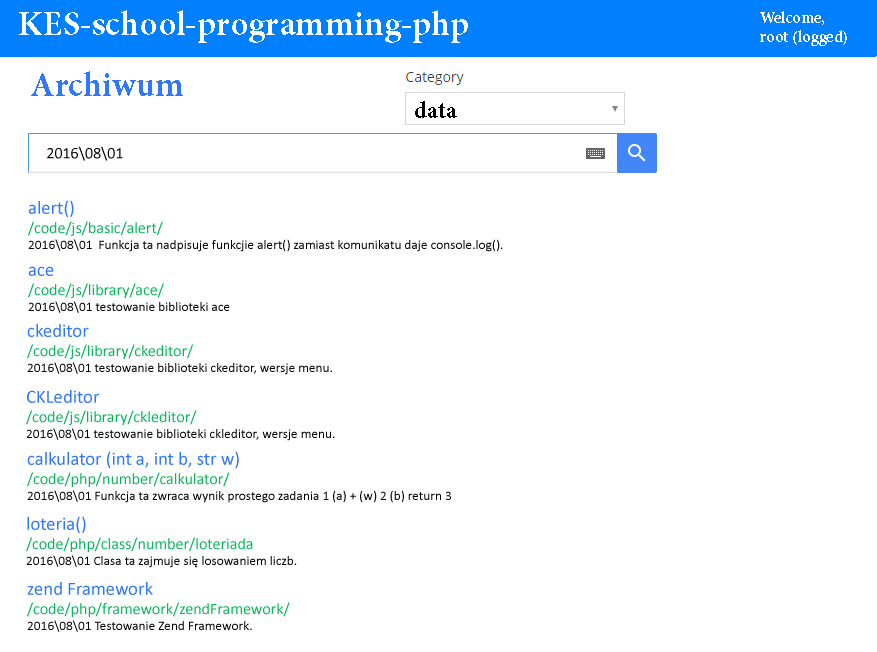
<style>
.page{position:relative;width:877px;height:652px;background:#ffffff}
.page>*{position:absolute;margin:0}
.t1{font:34.7px "MinionPro-Bold";color:#ffffff}
.t2{font:16px "MinionPro-Bold";color:#ffffff}
.t3{font:34.7px "MinionPro-Bold";color:#3077fa}
.t4{font:16px "Calibri";color:#030303}
.t5{font:13.3px "Calibri";color:#030303}
.t6{font:18.7px "Calibri";color:#3077fa}
.t7{font:16px "Calibri";color:#08b65a}
</style>
<div class="page">
<p class="t1" style="left:19px;top:10px;width:449px;height:33px">KES-school-programming-php</p>
<p class="t2" style="left:760px;top:11px;width:87px;height:35px">Welcome,<br>root (logged)</p>
<p class="t3" style="left:31px;top:71px;width:152px;height:25px">Archiwum</p>
<p class="t4" style="left:47px;top:146px;width:76px;height:15px">2016\08\01</p>
<p class="t5" style="left:28px;top:200px;width:475px;height:52px"><span class="t6">alert()<br></span><span class="t7">/code/js/basic/alert/  <br></span>2016\08\01  Funkcja ta nadpisuje funkcjie alert() zamiast komunikatu daje console.log().</p>
<p class="t5" style="left:28px;top:266px;width:202px;height:47px"><span class="t6">ace<br></span><span class="t7">/code/js/library/ace/<br></span>2016\08\01 testowanie biblioteki ace</p>
<p class="t5" style="left:27px;top:324px;width:305px;height:51px"><span class="t6">ckeditor<br></span><span class="t7">/code/js/library/ckeditor/<br></span>2016\08\01 testowanie biblioteki ckeditor, wersje menu.</p>
<p class="t5" style="left:26px;top:390px;width:309px;height:51px"><span class="t6">CKLeditor<br></span><span class="t7">/code/js/library/ckleditor/<br></span>2016\08\01 testowanie biblioteki ckleditor, wersje menu.</p>
<p class="t5" style="left:27px;top:451px;width:424px;height:52px"><span class="t6">calkulator (int a, int b, str w)<br></span><span class="t7">/code/php/number/calkulator/<br></span>2016\08\01 Funkcja ta zwraca wynik prostego zadania 1 (a) + (w) 2 (b) return 3</p>
<p class="t5" style="left:26px;top:516px;width:271px;height:52px"><span class="t6">loteria()<br></span><span class="t7">/code/php/class/number/loteriada<br></span>2016\08\01 Clasa ta zajmuje się losowaniem liczb.</p>
<p class="t5" style="left:27px;top:582px;width:263px;height:50px"><span class="t6">zend Framework<br></span><span class="t7">/code/php/framework/zendFramework/<br></span>2016\08\01 Testowanie Zend Framework.</p>
</div>
